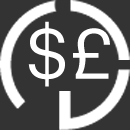
<style>
.page{position:relative;width:130px;height:130px;background:#333333}
.page>*{position:absolute;margin:0}
.t1{font:72px "jpfebgbckmbdellpfpaamohcbhoegdhf";letter-spacing:0.005em;color:#ffffff}
</style>
<div class="page">
<p class="t1" style="left:28px;top:21px;width:82px;height:66px">$£</p>
</div>
